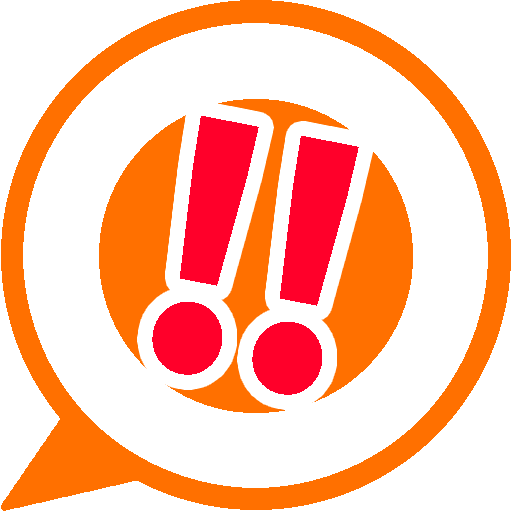
<style>
.page{position:relative;width:512px;height:512px;background:#ffffff}
.page>*{position:absolute;margin:0}
.t1{font:330.6px "Keifont";color:#ff002a}
</style>
<div class="page">
<p class="t1" style="left:152px;top:116px;width:207px;height:279px;rotate:11deg">!!</p>
</div>
